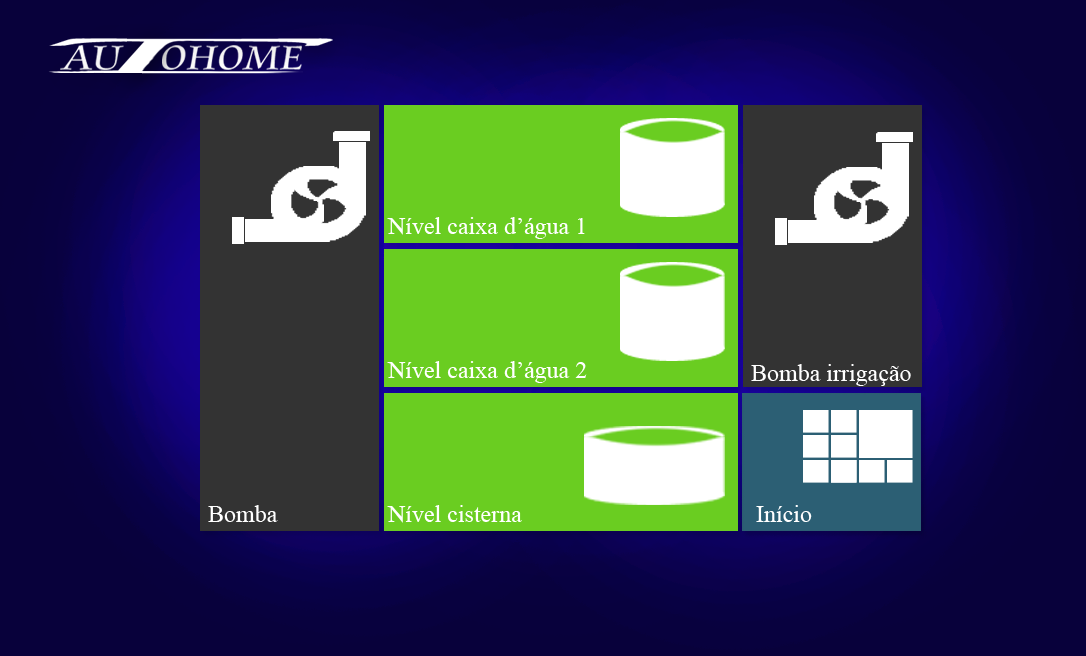
<style>
.page{position:relative;width:1086px;height:656px}
.page>*{position:absolute;margin:0}
.t1{font:36.4px "CataneoBT-Regular";color:#ffffff;scale:1.13 1}
.t2{font:24px "TimesNewRomanPSMT";color:#ffffff}
</style>
<div class="page">
<p class="t1" style="left:162px;top:45px;width:140px;height:25px">OHOME</p>
<p class="t2" style="left:387px;top:217px;width:198px;height:22px">Nível caixa d’água 1</p>
<p class="t2" style="left:387px;top:361px;width:200px;height:22px">Nível caixa d’água 2</p>
<p class="t2" style="left:751px;top:364px;width:160px;height:22px">Bomba irrigação</p>
<p class="t2" style="left:208px;top:505px;width:70px;height:17px">Bomba</p>
<p class="t2" style="left:387px;top:505px;width:135px;height:18px">Nível cisterna</p>
<p class="t2" style="left:756px;top:505px;width:56px;height:17px">Início</p>
<p class="t2" style="left:756px;top:505px;width:56px;height:17px">Início</p>
</div>
